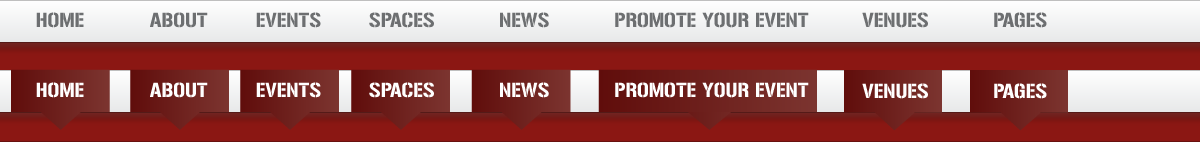
<style>
.page{position:relative;width:1200px;height:142px;background:#8b1713}
.page>*{position:absolute;margin:0}
.t1{font:18px "Gunplay-Regular";color:#6d6f71}
.t2{font:18px "Gunplay-Regular";color:#ffffff}
</style>
<div class="page">
<p class="t1" style="left:500px;top:12px;width:49px;height:16px">NEWS</p>
<p class="t1" style="left:615px;top:12px;width:194px;height:16px">PROMOTE YOUR EVENT</p>
<p class="t1" style="left:862px;top:12px;width:66px;height:16px">VENUES</p>
<p class="t1" style="left:994px;top:12px;width:53px;height:16px">PAGES</p>
<p class="t2" style="left:500px;top:82px;width:49px;height:16px">NEWS</p>
<p class="t2" style="left:615px;top:82px;width:194px;height:16px">PROMOTE YOUR EVENT</p>
<p class="t2" style="left:862px;top:83px;width:66px;height:16px">VENUES</p>
<p class="t2" style="left:994px;top:83px;width:53px;height:16px">PAGES</p>
</div>
